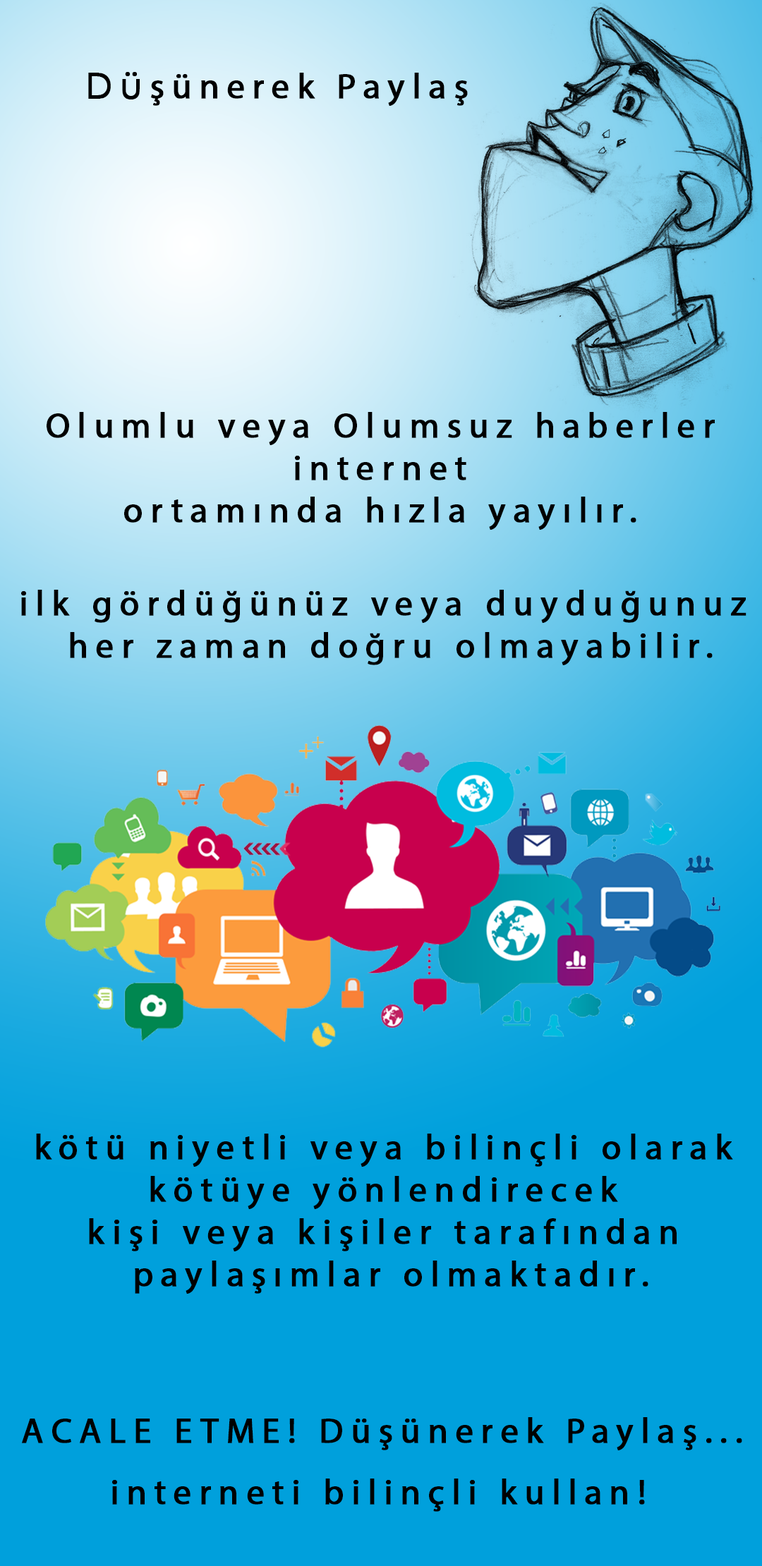
<style>
.page{position:relative;width:762px;height:1566px;background:#00a0dc}
.page>*{position:absolute;margin:0}
.t1{font:35.3px "MyriadPro-Regular";letter-spacing:0.2em;color:#000000;font-weight:bold}
.t2{font:35.3px "LevenimMT";letter-spacing:0.2em;color:#000000;font-weight:bold}
</style>
<div class="page">
<p class="t1" style="left:88px;top:72px;width:380px;height:34px"><span class="t2">Dü</span>şünerek Paylaş</p>
<p class="t1" style="left:47px;top:412px;width:667px;height:118px;text-align:center">Olumlu veya Olumsuz haberler<br> internet <br>ortamında hızla yayılır.</p>
<p class="t1" style="left:21px;top:590px;width:725px;height:75px;text-align:center">ilk gördüğünüz veya duyduğunuz <br>her zaman doğru olmayabilir.</p>
<p class="t1" style="left:36px;top:1133px;width:697px;height:160px;text-align:center">kötü niyetli veya bilinçli olarak <br>kötüye yönlendirecek <br>kişi veya kişiler tarafından <br>paylaşımlar olmaktadır.</p>
<p class="t1" style="left:22px;top:1417px;width:720px;height:33px">ACALE ETME! Düşünerek Paylaş...</p>
<p class="t1" style="left:112px;top:1478px;width:533px;height:33px">interneti bilinçli kullan!</p>
</div>
